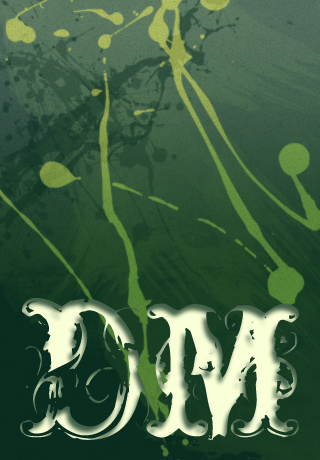
<style>
.page{position:relative;width:320px;height:460px}
.page>*{position:absolute;margin:0}
.t1{font:200px "Nasty"}
</style>
<div class="page">
<p class="t1" style="left:20px;top:283px;width:280px;height:157px">dm</p>
</div>
